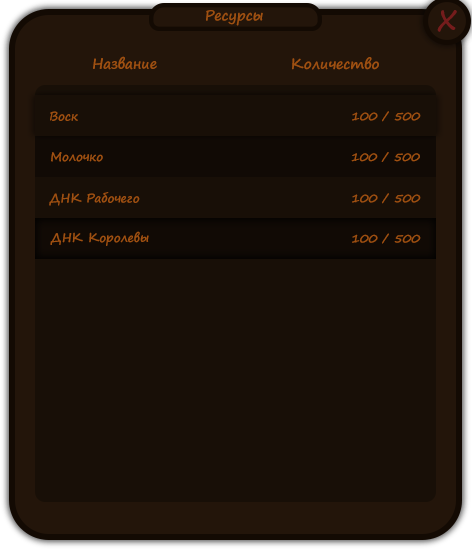
<style>
.page{position:relative;width:472px;height:550px;background:#180f07}
.page>*{position:absolute;margin:0}
.t1{font:14px "SegoePrint-Bold";color:#9f5011}
.t2{font:36px "SegoePrint";color:#751c1c}
.t3{font:12px "SegoePrint-Bold";color:#9f5011}
</style>
<div class="page">
<p class="t1" style="left:206px;top:10px;width:57px;height:16px">Ресурсы</p>
<p class="t2" style="left:437px;top:10px;width:20px;height:22px">x</p>
<p class="t1" style="left:93px;top:56px;width:64px;height:14px">Название</p>
<p class="t1" style="left:292px;top:57px;width:87px;height:13px">Количество</p>
<p class="t3" style="left:50px;top:111px;width:28px;height:10px">Воск</p>
<p class="t3" style="left:352px;top:111px;width:69px;height:11px">100 / 500</p>
<p class="t3" style="left:51px;top:152px;width:52px;height:10px">Молочко</p>
<p class="t3" style="left:351px;top:152px;width:69px;height:10px">100 / 500</p>
<p class="t3" style="left:49px;top:192px;width:91px;height:14px">ДНК Рабочего</p>
<p class="t3" style="left:352px;top:193px;width:69px;height:11px">100 / 500</p>
<p class="t3" style="left:50px;top:231px;width:99px;height:15px">ДНК Королевы</p>
<p class="t3" style="left:352px;top:233px;width:69px;height:11px">100 / 500</p>
</div>
